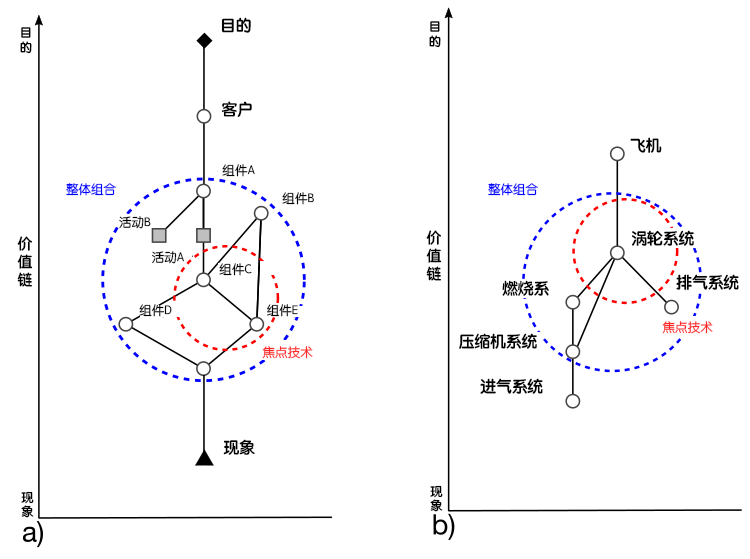
<style>
.page{position:relative;width:750px;height:559px;background:#ffffff}
.page>*{position:absolute;margin:0}
.t1{font:15.7px "STYuanti-SC-Bold";color:#000000}
.t2{font:12.2px "STYuanti-SC-Bold";color:#000000}
.t3{font:15.7px "STYuanti-SC-Bold";color:#010101}
.t4{font:12.6px "STYuanti-SC-Regular";color:#010101}
.t5{font:12.6px "STYuanti-SC-Regular";color:#0000ff}
.t6{font:14.7px "STYuanti-SC-Bold";color:#000000}
.t7{font:12.6px "STYuanti-SC-Regular";color:#ff2828}
</style>
<div class="page">
<p class="t1" style="left:221px;top:17px;width:30px;height:16px">目的</p>
<p class="t2" style="left:20px;top:27px;width:12px;height:27px">目<br>的</p>
<p class="t2" style="left:429px;top:21px;width:12px;height:27px">目<br>的</p>
<p class="t1" style="left:221px;top:101px;width:31px;height:16px">客户</p>
<p class="t3" style="left:630px;top:137px;width:32px;height:16px">飞机</p>
<p class="t4" style="left:222px;top:164px;width:33px;height:13px">组件A</p>
<p class="t5" style="left:66px;top:183px;width:50px;height:13px">整体组合</p>
<p class="t5" style="left:488px;top:183px;width:50px;height:13px">整体组合</p>
<p class="t4" style="left:282px;top:192px;width:32px;height:13px">组件B</p>
<p class="t4" style="left:119px;top:216px;width:32px;height:13px">活动B</p>
<p class="t6" style="left:426px;top:230px;width:16px;height:51px">价<br>值<br>链</p>
<p class="t3" style="left:632px;top:230px;width:62px;height:16px">涡轮系统</p>
<p class="t6" style="left:17px;top:236px;width:16px;height:51px">价<br>值<br>链</p>
<p class="t4" style="left:152px;top:251px;width:32px;height:13px">活动A</p>
<p class="t4" style="left:219px;top:263px;width:33px;height:13px">组件C</p>
<p class="t3" style="left:502px;top:280px;width:47px;height:16px">燃烧系</p>
<p class="t3" style="left:676px;top:274px;width:63px;height:16px">排气系统</p>
<p class="t4" style="left:139px;top:304px;width:33px;height:13px">组件D</p>
<p class="t4" style="left:267px;top:304px;width:31px;height:13px">组件E</p>
<p class="t7" style="left:662px;top:321px;width:51px;height:13px">焦点技术</p>
<p class="t3" style="left:459px;top:333px;width:78px;height:16px">压缩机系统</p>
<p class="t7" style="left:262px;top:346px;width:51px;height:13px">焦点技术</p>
<p class="t3" style="left:480px;top:378px;width:63px;height:16px">进气系统</p>
<p class="t1" style="left:223px;top:439px;width:32px;height:16px">现象</p>
<p class="t2" style="left:430px;top:485px;width:13px;height:27px">现<br>象</p>
<p class="t2" style="left:21px;top:491px;width:13px;height:27px">现<br>象</p>
</div>
